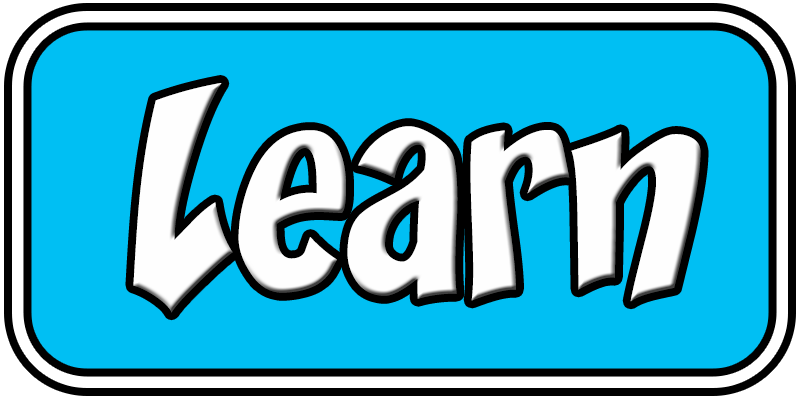
<style>
.page{position:relative;width:800px;height:400px;background:#00bff3}
.page>*{position:absolute;margin:0}
.t1{font:266.7px "Yikes";color:#fefefe}
</style>
<div class="page">
<p class="t1" style="left:133px;top:83px;width:568px;height:230px">Learn</p>
</div>
